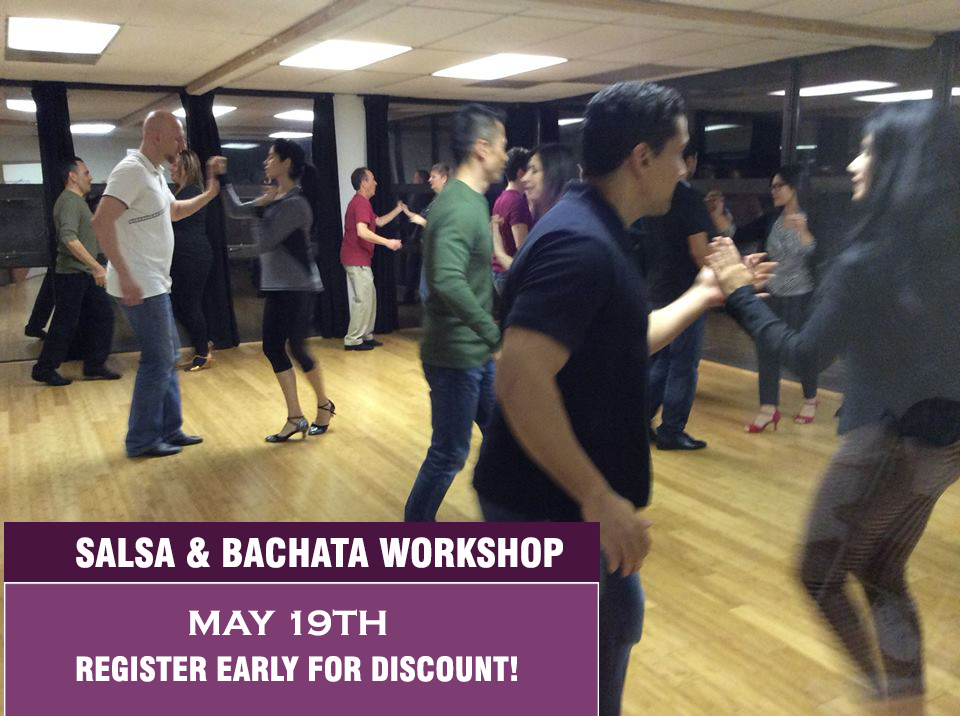
<style>
.page{position:relative;width:960px;height:716px}
.page>*{position:absolute;margin:0}
.t1{font:38.3px "Swiss721BT-BlackCondensed";color:#fefcfc}
.t2{font:36.3px "CopperplateGothic-Bold";color:#fefcfc}
.t3{font:32.3px "Swiss721BT-BlackCondensed";color:#fefcfc}
</style>
<div class="page">
<p class="t1" style="left:76px;top:537px;width:487px;height:31px">SALSA &amp; BACHATA WORKSHOP</p>
<p class="t2" style="left:189px;top:609px;width:198px;height:27px">MAY 19TH</p>
<p class="t3" style="left:76px;top:656px;width:441px;height:26px">REGISTER EARLY FOR DISCOUNT!</p>
</div>
